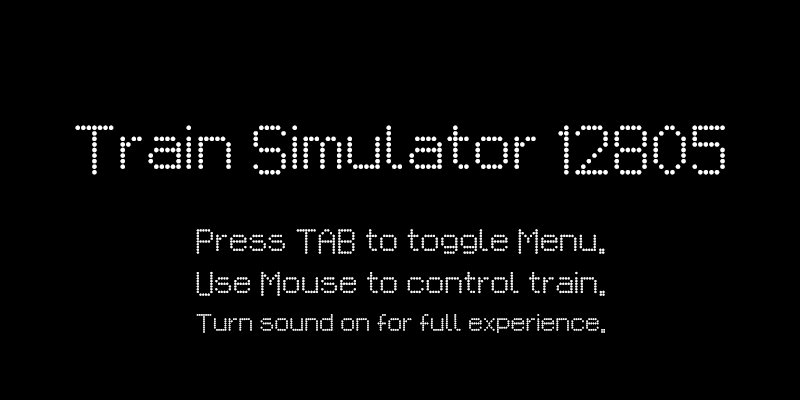
<style>
.page{position:relative;width:800px;height:400px;background:#000000}
.page>*{position:absolute;margin:0}
.t1{font:50px "MetroTimeSign";color:#ffffff}
.t2{font:19.2px/37.5px "MetroTimeSign";color:#ffffff}
.t3{font:25px/37.5px "MetroTimeSign";color:#ffffff}
.t4{font:24.4px/41.7px "MetroTimeSign";color:#ffffff}
</style>
<div class="page">
<p class="t1" style="left:75px;top:125px;width:650px;height:50px">Train Simulator 12805</p>
<p class="t2" style="left:196px;top:229px;width:409px;height:104px;text-align:center"><span class="t3">Press TAB to toggle Menu.<br></span><span class="t4">Use Mouse to control train.<br></span>Turn sound on for full experience.</p>
</div>
